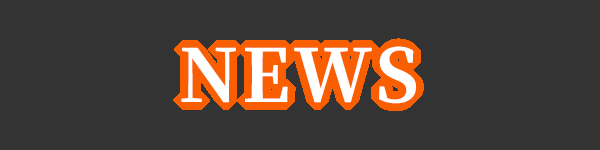
<style>
.page{position:relative;width:600px;height:150px;background:#333333}
.page>*{position:absolute;margin:0}
.t1{font:72px "NotoSerifJP-Bold";letter-spacing:0.025em;color:#ffffff;font-weight:bold}
</style>
<div class="page">
<p class="t1" style="left:181px;top:46px;width:235px;height:58px">NEWS</p>
</div>
